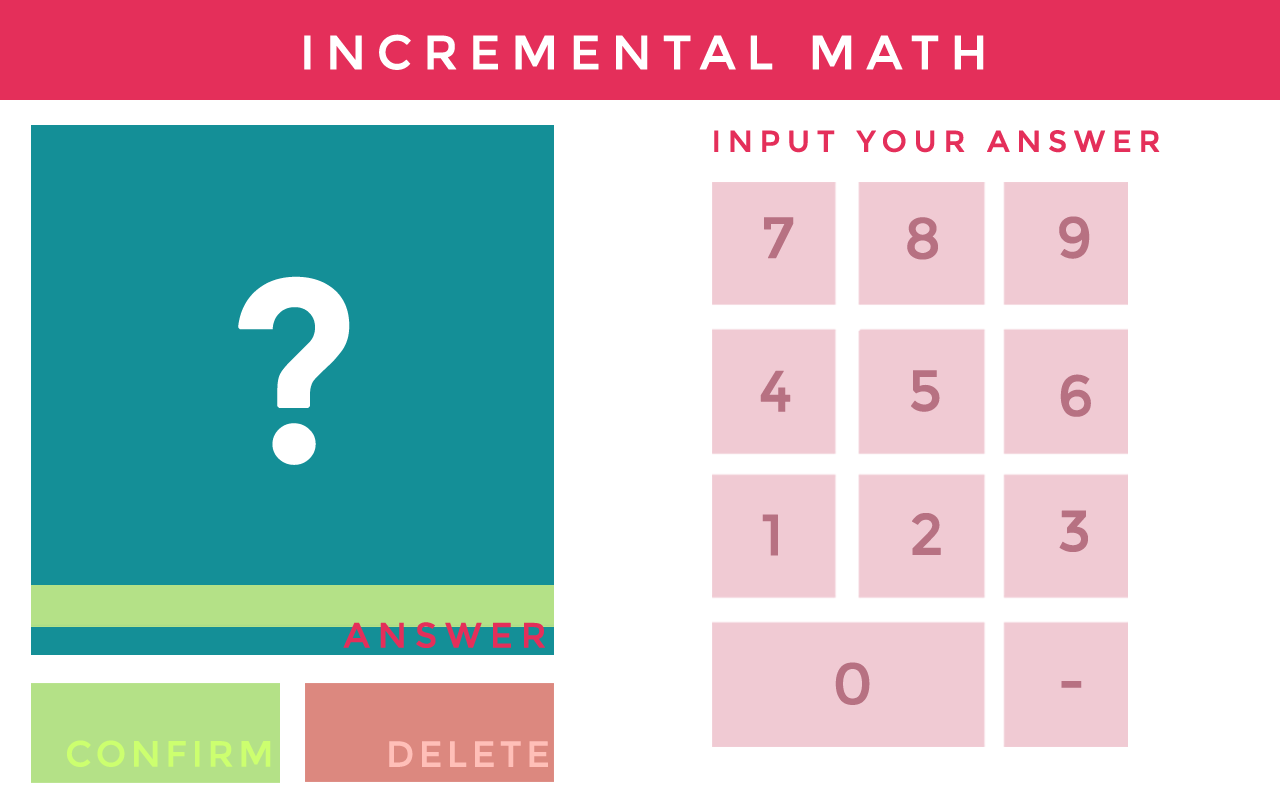
<style>
.page{position:relative;width:1280px;height:800px;background:#ffffff}
.page>*{position:absolute;margin:0}
.t1{font:48px "Montserrat-Regular";letter-spacing:0.2em;color:#ffffff;text-transform:uppercase;font-weight:bold}
.t2{font:30px "Montserrat-Regular";letter-spacing:0.2em;color:#e42f5a;text-transform:uppercase;font-weight:bold}
.t3{font:57.6px "Montserrat-Regular";letter-spacing:0.2em;color:#b77182;text-transform:uppercase;font-weight:bold}
.t4{font:256.5px "Montserrat-Regular";letter-spacing:0.2em;color:#ffffff;text-transform:uppercase;font-weight:bold}
.t5{font:35.1px "Montserrat-Regular";letter-spacing:0.2em;color:#e42f5a;text-transform:uppercase;font-weight:bold}
.t6{font:36px "Montserrat-Regular";letter-spacing:0.1em;color:#ccff6f;text-transform:uppercase;font-weight:bold}
.t7{font:36px "Montserrat-Regular";letter-spacing:0.1em;color:#ffbfb8;text-transform:uppercase;font-weight:bold}
</style>
<div class="page">
<p class="t1" style="left:304px;top:34px;width:680px;height:36px">Incremental Math</p>
<p class="t2" style="left:714px;top:130px;width:446px;height:23px">Input your Answer</p>
<p class="t3" style="left:764px;top:217px;width:30px;height:42px">7</p>
<p class="t3" style="left:907px;top:217px;width:31px;height:43px">8</p>
<p class="t3" style="left:1059px;top:216px;width:31px;height:43px">9</p>
<p class="t4" style="left:238px;top:276px;width:112px;height:189px">?</p>
<p class="t3" style="left:760px;top:370px;width:31px;height:42px">4</p>
<p class="t3" style="left:911px;top:370px;width:29px;height:42px">5</p>
<p class="t3" style="left:1060px;top:374px;width:31px;height:43px">6</p>
<p class="t3" style="left:1059px;top:510px;width:29px;height:42px">3</p>
<p class="t3" style="left:762px;top:514px;width:16px;height:42px">1</p>
<p class="t3" style="left:912px;top:513px;width:29px;height:42px">2</p>
<p class="t5" style="left:343px;top:622px;width:202px;height:26px">Answer</p>
<p class="t3" style="left:835px;top:662px;width:35px;height:43px">0</p>
<p class="t3" style="left:1061px;top:681px;width:21px;height:7px">-</p>
<p class="t6" style="left:67px;top:740px;width:204px;height:27px">Confirm</p>
<p class="t7" style="left:389px;top:741px;width:159px;height:26px">Delete</p>
</div>
